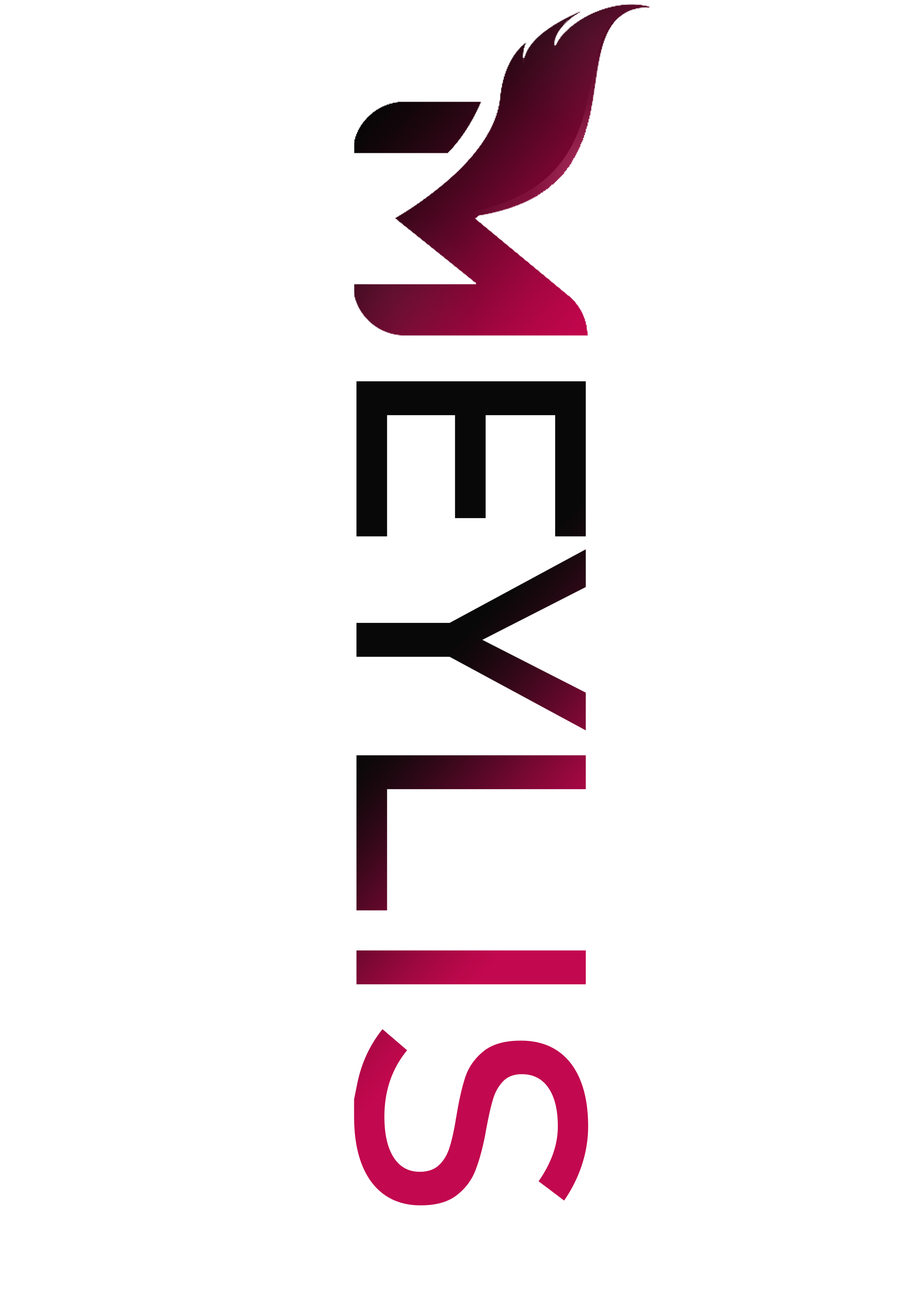
<style>
.page{position:relative;width:918px;height:1299px;background:#ffffff}
.page>*{position:absolute;margin:0}
.t1{font:323px "Bahnschrift";scale:1.05 1}
</style>
<div class="page">
<p class="t1" style="left:354px;top:381px;width:234px;height:824px;rotate:90deg">EYLIS</p>
</div>
